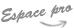
<style>
.page{position:relative;width:74px;height:28px;background:#ffffff}
.page>*{position:absolute;margin:0}
.t1{font:16.7px "BrushScriptStd";color:#8d8a8a}
</style>
<div class="page">
<p class="t1" style="left:1px;top:5px;width:72px;height:18px;rotate:-8deg">Espace pro</p>
</div>
